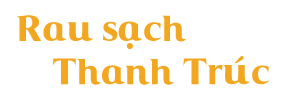
<style>
.page{position:relative;width:300px;height:100px;background:#ffffff}
.page>*{position:absolute;margin:0}
.t1{font:36px "Coke4U";color:#f3a61f}
</style>
<div class="page">
<p class="t1" style="left:17px;top:15px;width:253px;height:70px">Rau sạch<br>    Thanh Trúc</p>
</div>
